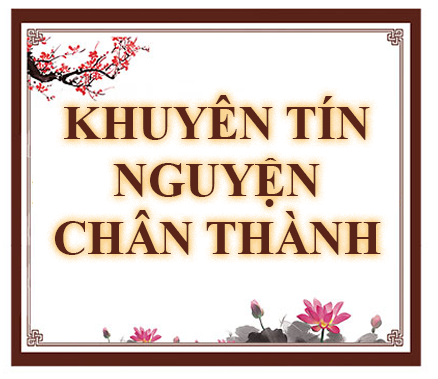
<style>
.page{position:relative;width:438px;height:379px;background:#ffffff}
.page>*{position:absolute;margin:0}
.t1{font:48px "TimesNewRomanPS-BoldMT";color:#5a2418;text-transform:uppercase}
</style>
<div class="page">
<p class="t1" style="left:54px;top:95px;width:327px;height:160px;text-align:center">Khuyên tín nguyện chân thành tha thiết</p>
</div>
